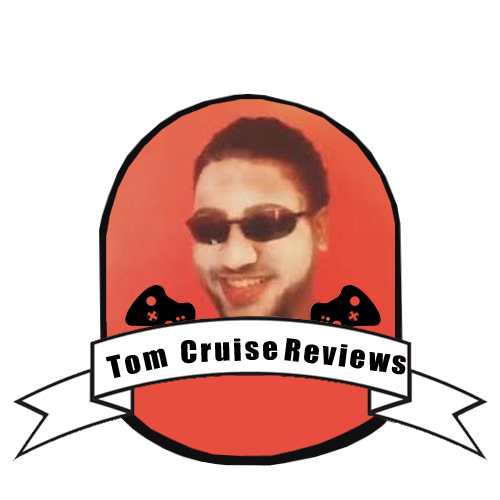
<style>
.page{position:relative;width:500px;height:500px;background:#ffffff}
.page>*{position:absolute;margin:0}
.t1{font:28.2px "Impact";letter-spacing:0.09em;color:#000000;scale:1.1 1}
</style>
<div class="page">
<p class="t1" style="left:181px;top:338px;width:97px;height:26px;rotate:-2deg">Cruise</p>
<p class="t1" style="left:284px;top:338px;width:122px;height:37px;rotate:7deg">Reviews</p>
<p class="t1" style="left:105px;top:348px;width:63px;height:31px;rotate:-13deg">Tom</p>
</div>
